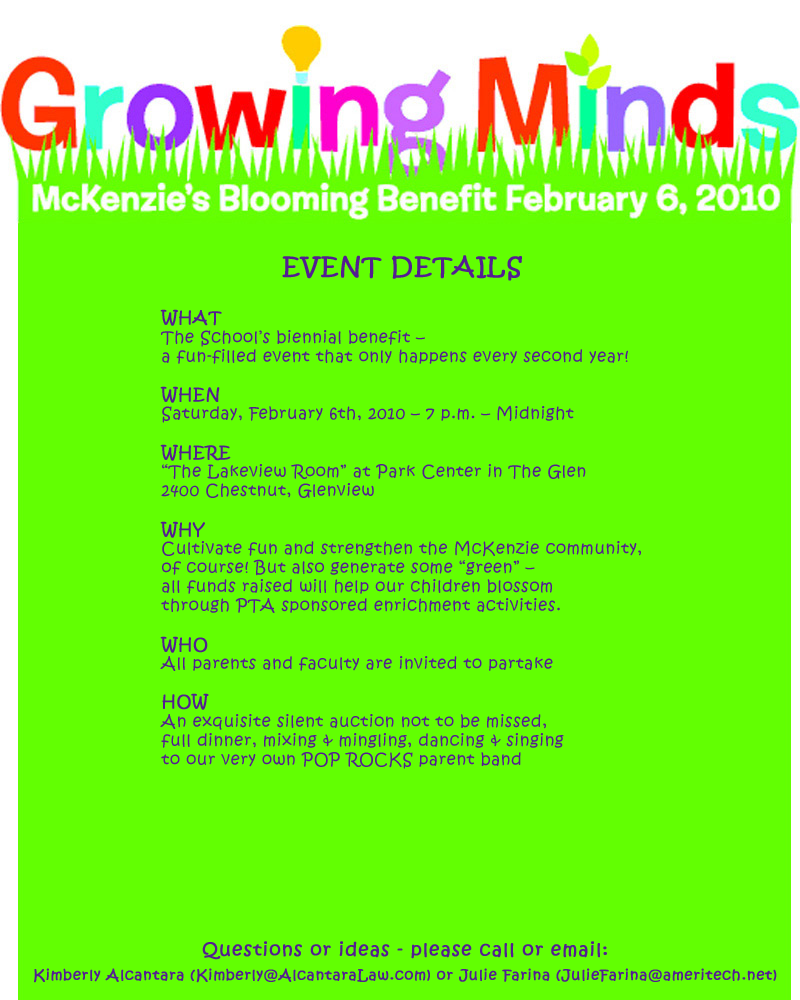
<style>
.page{position:relative;width:800px;height:1000px;background:#62ff02}
.page>*{position:absolute;margin:0}
.t1{font:24px "KristenITC-Regular";letter-spacing:0.05em;color:#541d92;font-weight:bold}
.t2{font:16px "KristenITC-Regular";letter-spacing:0.05em;color:#541d92}
.t3{font:16px "KristenITC-Regular";letter-spacing:0.05em;color:#541d92;font-weight:bold}
.t4{font:14px/24px "KristenITC-Regular";letter-spacing:0.05em;color:#541d92;font-weight:bold}
.t5{font:18px/24px "KristenITC-Regular";letter-spacing:0.05em;color:#541d92;font-weight:bold}
</style>
<div class="page">
<p class="t1" style="left:282px;top:255px;width:240px;height:26px">EVENT DETAILS</p>
<p class="t2" style="left:160px;top:309px;width:481px;height:460px"><span class="t3">WHAT<br></span>The School’s biennial benefit – <br>a fun-filled event that only happens every second year!<br><br><span class="t3">WHEN<br></span>Saturday, February 6th, 2010 – 7 p.m. – Midnight<br><br><span class="t3">WHERE<br></span>“The Lakeview Room” at Park Center in The Glen<br>2400 Chestnut, Glenview<br><br><span class="t3">WHY<br></span>Cultivate fun and strengthen the McKenzie community,<br>of course! But also generate some “green” –<br>all funds raised will help our children blossom<br>through PTA sponsored enrichment activities.<br><br><span class="t3">WHO<br></span>All parents and faculty are invited to partake<br><br><span class="t3">HOW<br></span>An exquisite silent auction not to be missed,<br>full dinner, mixing &amp; mingling, dancing &amp; singing<br>to our very own POP ROCKS parent band</p>
<p class="t4" style="left:34px;top:941px;width:743px;height:42px;text-align:center"><span class="t5">Questions or ideas - please call or email:<br></span>Kimberly Alcantara (Kimberly@AlcantaraLaw.com) or Julie Farina (JulieFarina@ameritech.net)</p>
</div>
